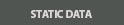
<style>
.page{position:relative;width:124px;height:25px;background:#505551}
.page>*{position:absolute;margin:0}
.t1{font:11px "MyriadHebrew-Bold";color:#dad6d6}
</style>
<div class="page">
<p class="t1" style="left:31px;top:10px;width:61px;height:8px">STATIC DATA</p>
</div>
